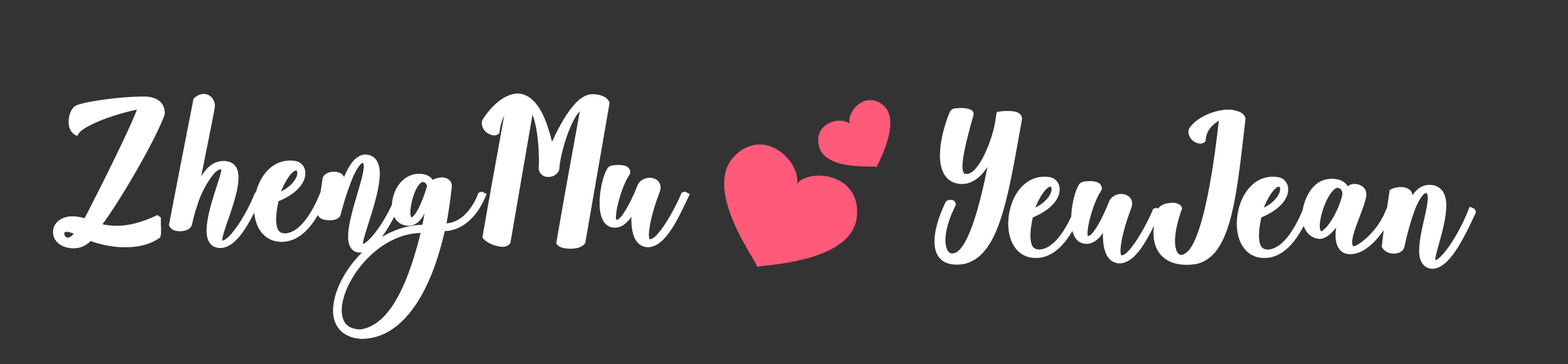
<style>
.page{position:relative;width:1568px;height:364px;background:#333333}
.page>*{position:absolute;margin:0}
.t1{font:177.8px "molyna-Regular";letter-spacing:-0.01em;color:#ffffff;font-weight:bold}
.t2{font:177.8px "EmojiOneColor";letter-spacing:-0.01em;color:#ffffff}
</style>
<div class="page">
<p class="t1" style="left:53px;top:93px;width:837px;height:246px">ZhengMu <span class="t2">💕</span></p>
<p class="t1" style="left:934px;top:108px;width:542px;height:161px">YeuJean</p>
</div>
